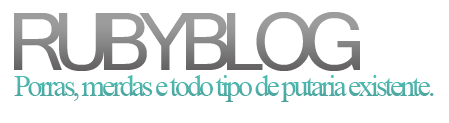
<style>
.page{position:relative;width:449px;height:123px;background:#ffffff}
.page>*{position:absolute;margin:0}
.t1{font:120px "Vrinda";letter-spacing:-0.1em;color:#898888}
.t2{font:30px "TimesNewRomanPSMT";letter-spacing:-0.1em;color:#4ca19a}
</style>
<div class="page">
<p class="t1" style="left:14px;top:12px;width:346px;height:59px">RUBYBLOG</p>
<p class="t2" style="left:14px;top:75px;width:420px;height:27px">Porras, merdas e todo tipo de putaria existente.</p>
</div>
